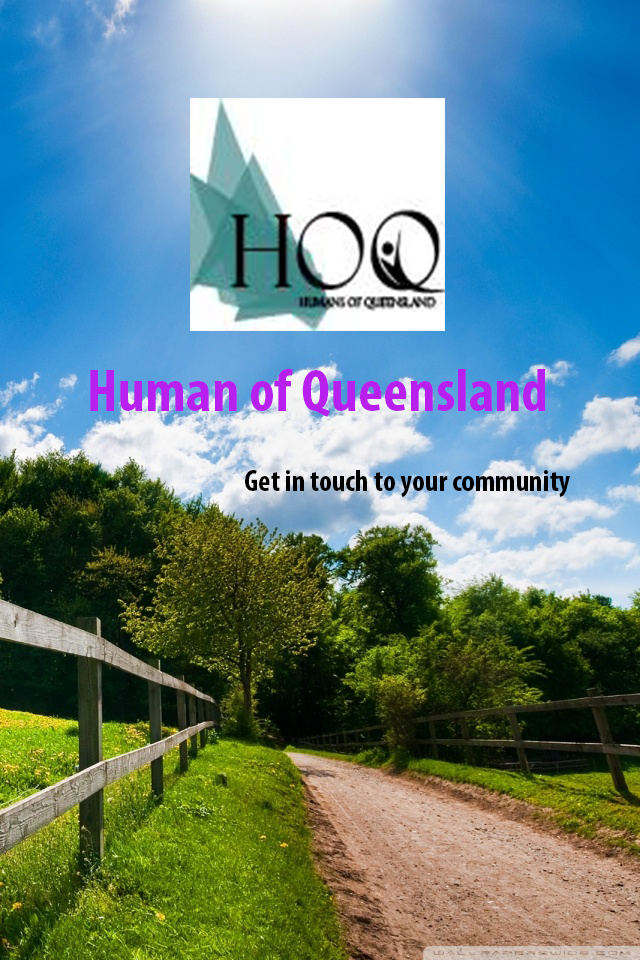
<style>
.page{position:relative;width:640px;height:960px}
.page>*{position:absolute;margin:0}
.t1{font:60px "MyriadPro-BoldCond";color:#b820f0}
.t2{font:30px "MyriadPro-BoldCond";color:#000000}
</style>
<div class="page">
<p class="t1" style="left:90px;top:369px;width:456px;height:48px">Human of Queensland</p>
<p class="t2" style="left:245px;top:470px;width:325px;height:28px">Get in touch to your community</p>
</div>
